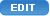
<style>
.page{position:relative;width:50px;height:16px}
.page>*{position:absolute;margin:0}
.t1{font:9px "ArialMT";color:#ffffff;font-weight:bold}
</style>
<div class="page">
<p class="t1" style="left:11px;top:4px;width:24px;height:7px">EDIT</p>
</div>
